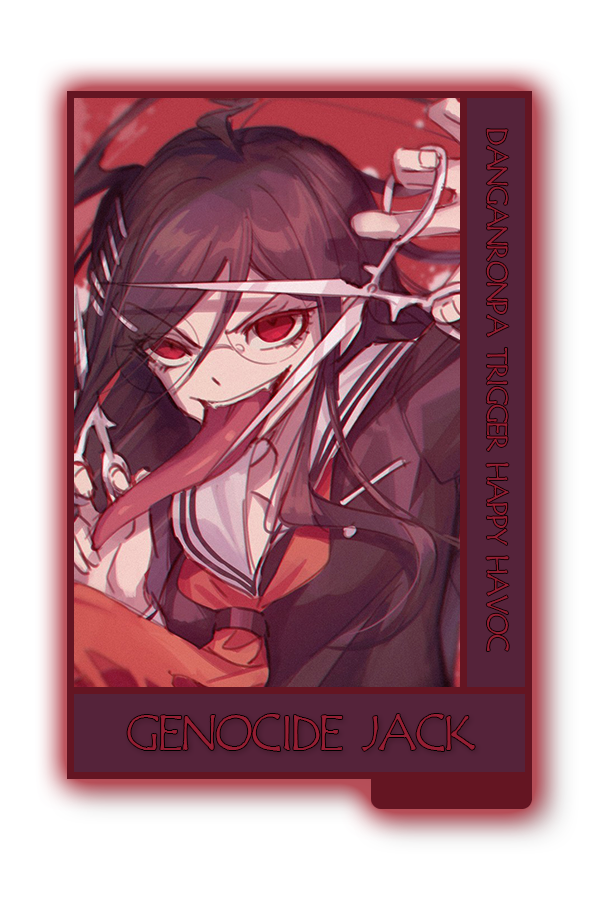
<style>
.page{position:relative;width:600px;height:900px;background:#ffffff}
.page>*{position:absolute;margin:0}
.t1{font:32.4px "Daruma-TextOnlyMixcase";color:#8c2330}
.t2{font:56px "Daruma-TextOnlyMixcase";color:#8c2330}
</style>
<div class="page">
<p class="t1" style="left:486px;top:129px;width:23px;height:522px;rotate:90deg">DANGANRONPA TRIGGER HAPPY HAVOC</p>
<p class="t2" style="left:127px;top:714px;width:348px;height:37px">GENOCIDE JACK</p>
</div>
